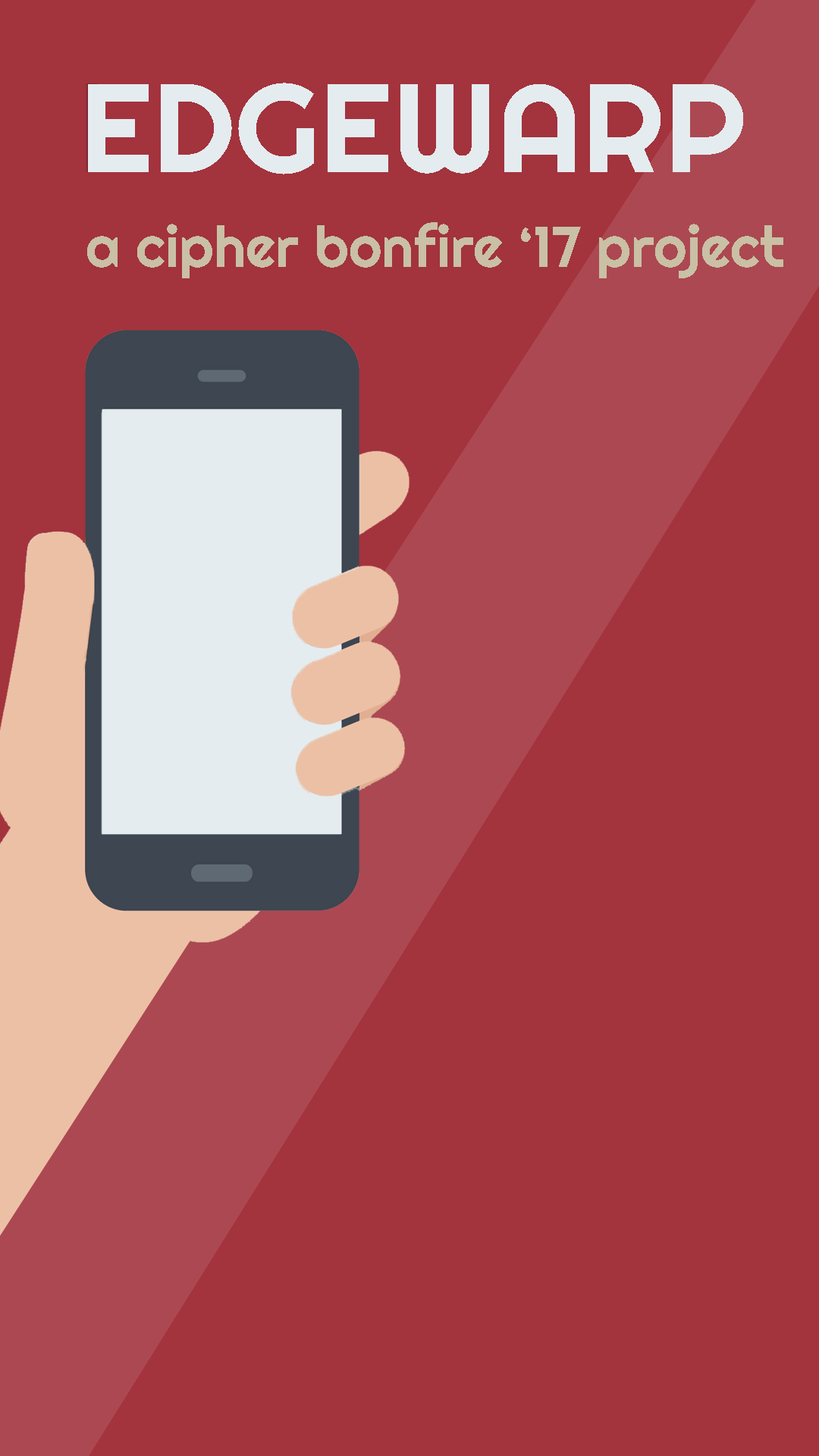
<style>
.page{position:relative;width:819px;height:1456px;background:#a3333d}
.page>*{position:absolute;margin:0}
.t1{font:126.1px "Righteous-Regular";color:#e4ecef}
.t2{font:56.8px "Righteous-Regular";color:#c9c0a5}
</style>
<div class="page">
<p class="t1" style="left:88px;top:83px;width:655px;height:91px">EDGEWARP</p>
<p class="t2" style="left:87px;top:222px;width:696px;height:56px">a cipher bonfire ‘17 project</p>
</div>
